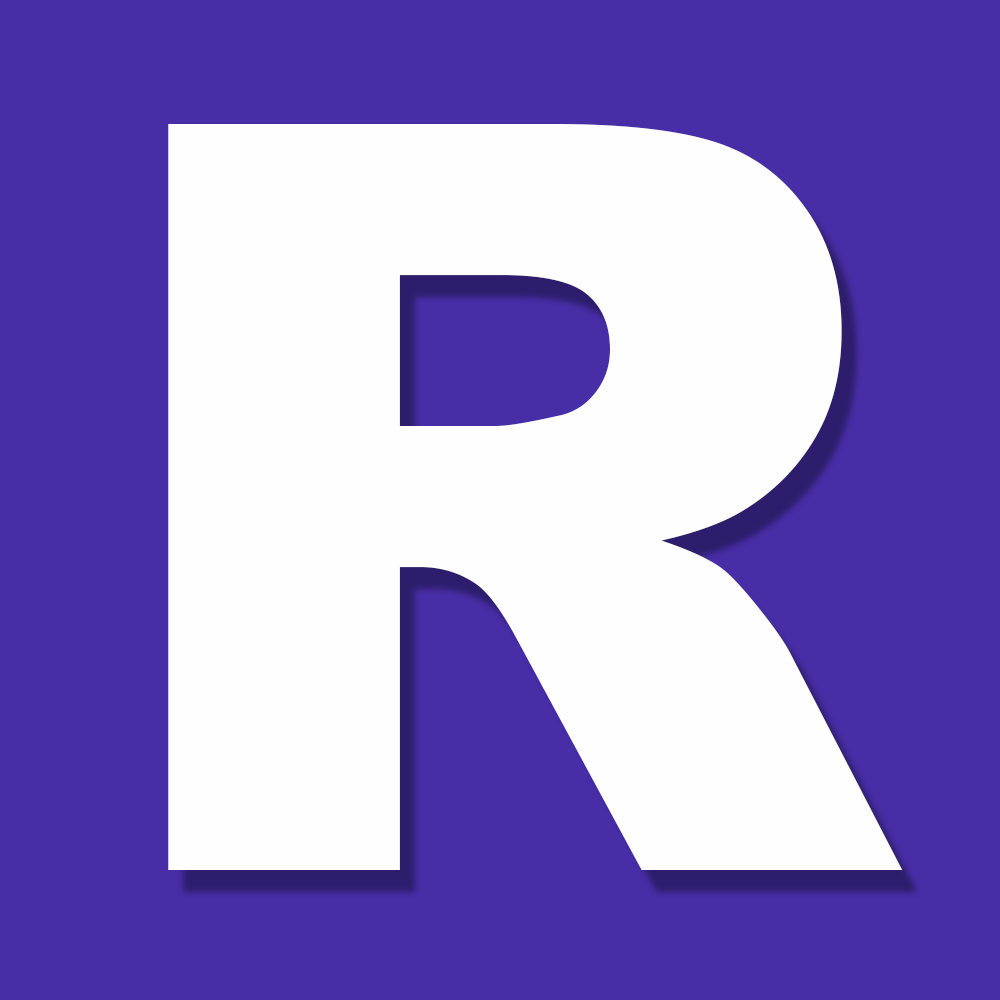
<style>
.page{position:relative;width:1000px;height:1000px;background:#472da6}
.page>*{position:absolute;margin:0}
.t1{font:1042.3px "Arial-Black";color:#fefefe}
</style>
<div class="page">
<p class="t1" style="left:168px;top:124px;width:735px;height:746px">R</p>
</div>
